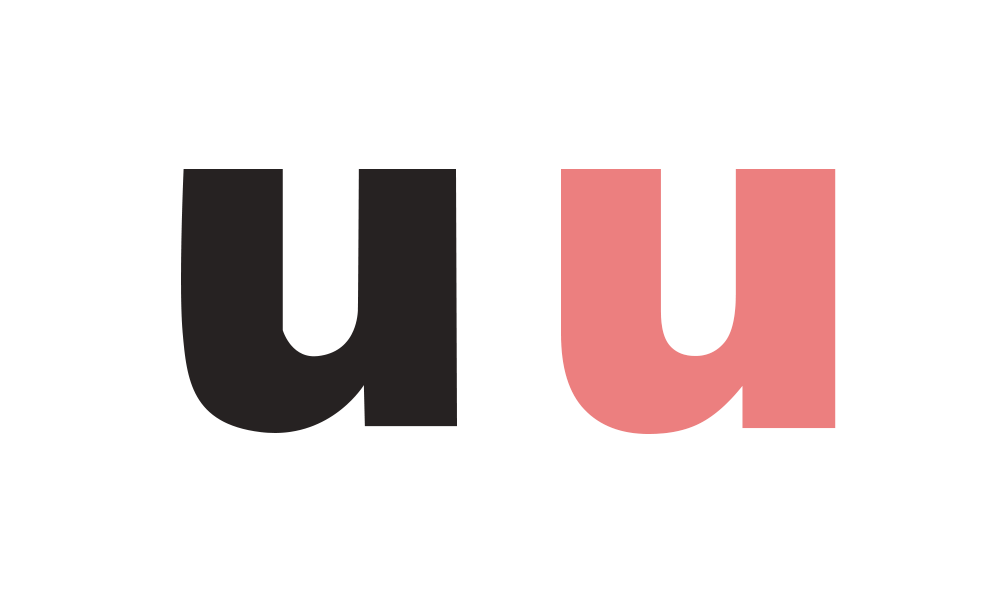
<style>
.page{position:relative;width:1000px;height:600px;background:#ffffff}
.page>*{position:absolute;margin:0}
.t1{font:500px "Arial-Black";color:#ec7f7f}
</style>
<div class="page">
<p class="t1" style="left:561px;top:169px;width:275px;height:265px">u</p>
</div>
